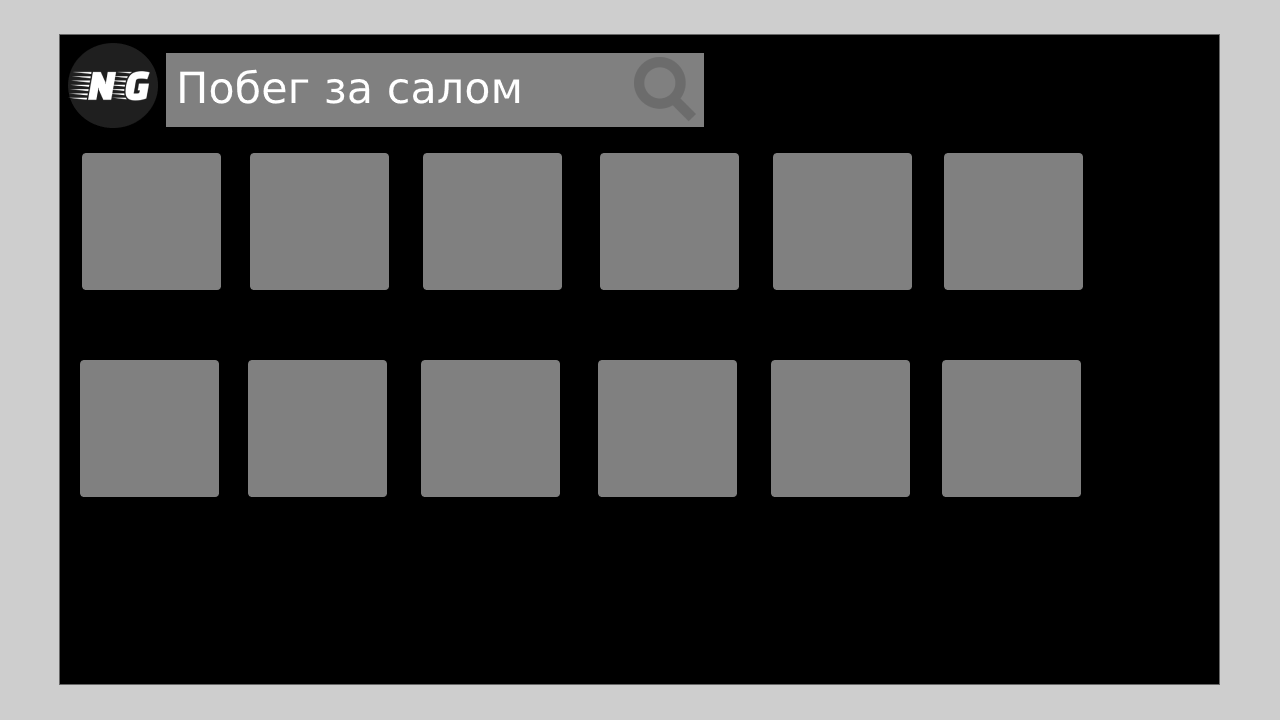
<style>
.page{position:relative;width:1280px;height:720px;background:#000000}
.page>*{position:absolute;margin:0}
.t1{font:43px "DejaVuSans";color:#ffffff}
</style>
<div class="page">
<p class="t1" style="left:180px;top:69px;width:340px;height:35px">Побег за салом</p>
</div>
